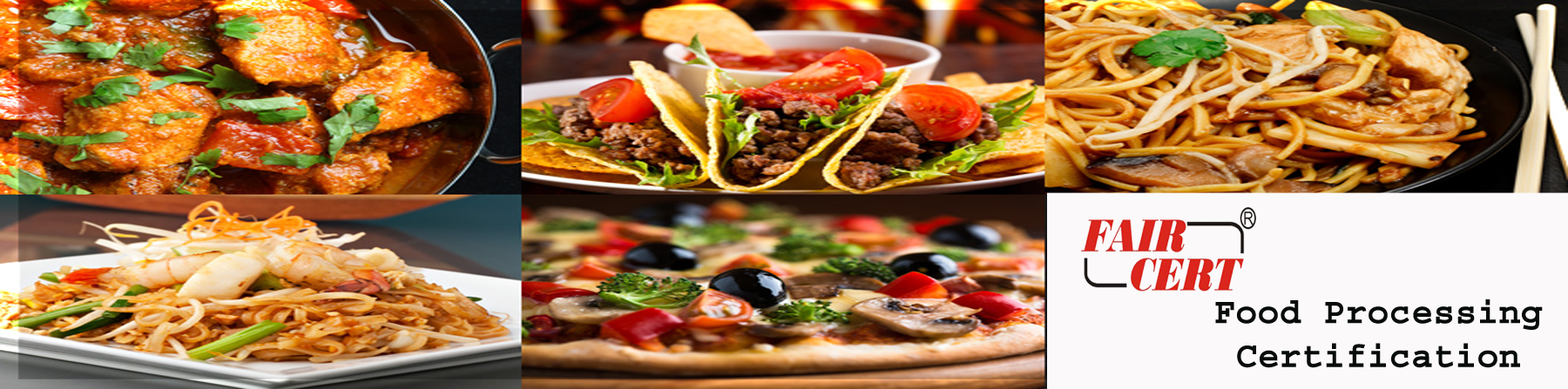
<style>
.page{position:relative;width:1568px;height:389px}
.page>*{position:absolute;margin:0}
.t1{font:36.6px "Courier-Bold";color:#080b0b}
</style>
<div class="page">
<p class="t1" style="left:1215px;top:300px;width:328px;height:68px;text-align:center">Food Processing <br>Certification</p>
</div>
